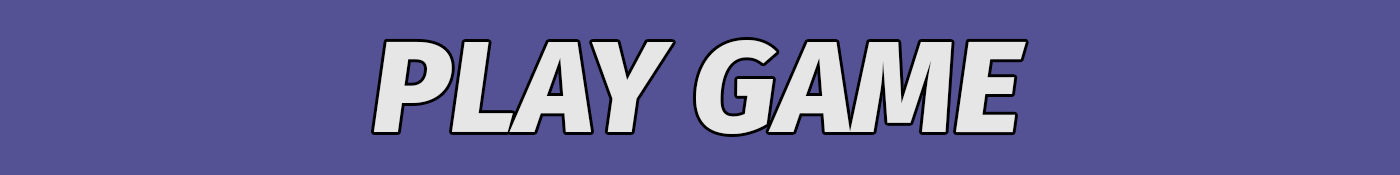
<style>
.page{position:relative;width:1400px;height:175px;background:#545195}
.page>*{position:absolute;margin:0}
.t1{font:131px "FiraSans-ExtraBoldItalic";color:#e6e6e6}
</style>
<div class="page">
<p class="t1" style="left:373px;top:40px;width:653px;height:94px">PLAY GAME</p>
</div>
